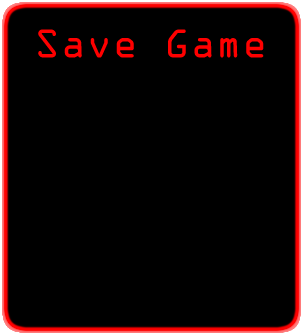
<style>
.page{position:relative;width:303px;height:335px;background:#000000}
.page>*{position:absolute;margin:0}
.t1{font:36px "OCRAStd";color:#ff0000}
</style>
<div class="page">
<p class="t1" style="left:38px;top:29px;width:226px;height:29px">Save Game</p>
</div>
